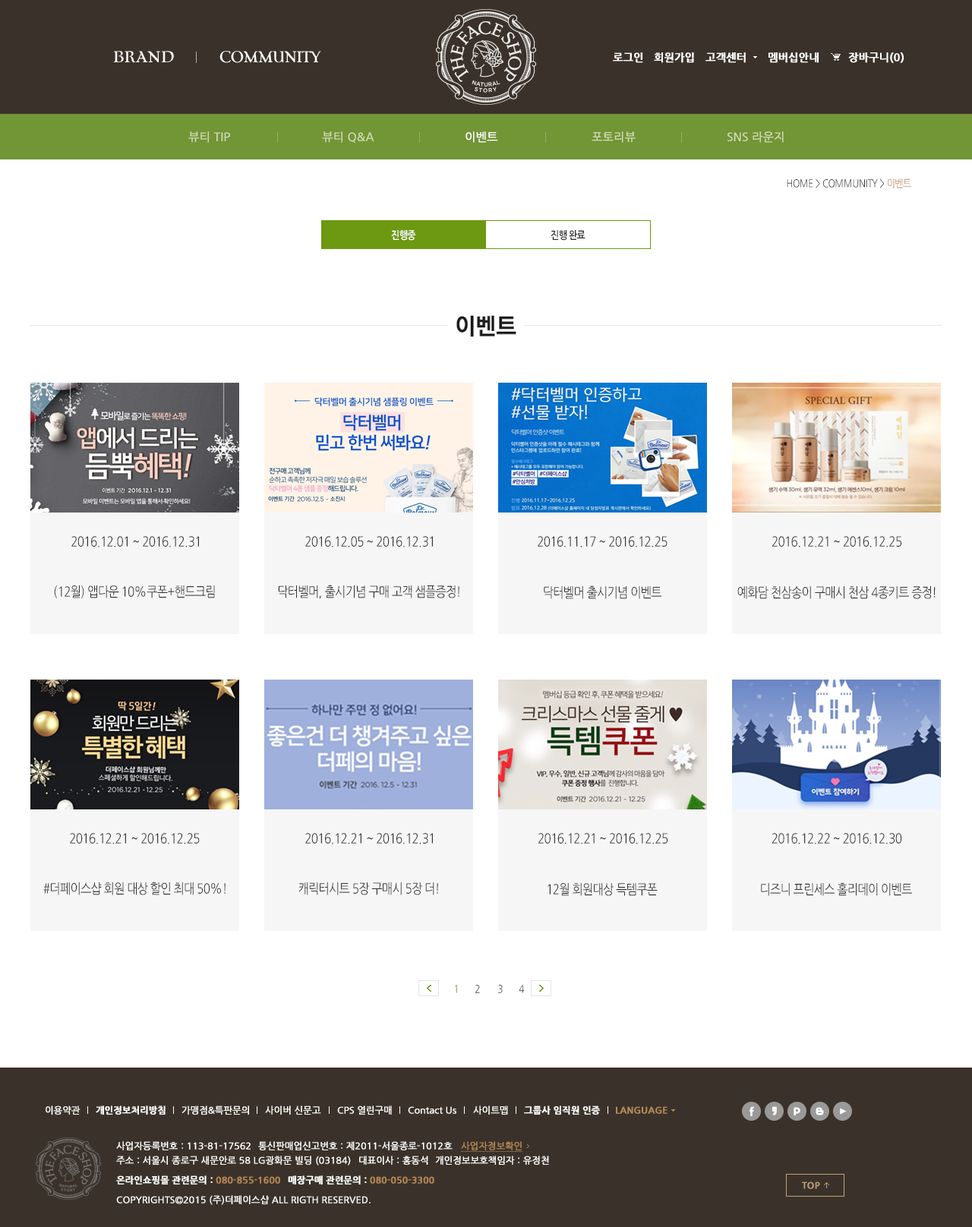
<style>
.page{position:relative;width:972px;height:1227px;background:#ffffff}
.page>*{position:absolute;margin:0}
.t1{font:10.6px "NanumGothicBold";color:#ffffff;font-weight:bold}
.t2{font:11.4px "NanumGothic";color:#cddbb1;font-weight:bold}
.t3{font:11.4px "NanumGothic";color:#ffffff;font-weight:bold}
.t4{font:10.6px "NanumGothic";letter-spacing:-0.03em;color:#333333;scale:0.85 1}
.t5{font:10.6px "NanumGothic";letter-spacing:-0.03em;color:#b68957;scale:0.85 1}
.t6{font:10.6px "NanumGothicBold";letter-spacing:-0.03em;color:#ffffff;scale:0.85 1}
.t7{font:10.6px "NanumGothicBold";letter-spacing:-0.03em;color:#333333;scale:0.85 1}
.t8{font:13.7px "NanumGothic";letter-spacing:-0.03em;color:#333333;scale:0.85 1}
.t9{font:10.6px "NanumGothic";letter-spacing:-0.03em;scale:0.85 1}
.t10{font:9.1px "NanumGothic";color:#ffffff;font-weight:bold}
.t11{font:9.1px "NanumGothicBold";color:#ffffff;font-weight:bold}
.t12{font:9.1px "NanumGothicBold";color:#b68957;font-weight:bold}
.t13{font:9.1px "NanumGothic";color:#b68957;font-weight:bold;text-decoration:underline}
</style>
<div class="page">
<p class="t1" style="left:613px;top:52px;width:30px;height:11px">로그인</p>
<p class="t1" style="left:654px;top:52px;width:40px;height:11px">회원가입</p>
<p class="t1" style="left:705px;top:52px;width:41px;height:11px">고객센터</p>
<p class="t1" style="left:768px;top:52px;width:50px;height:11px">멤버십안내</p>
<p class="t1" style="left:848px;top:52px;width:56px;height:11px">장바구니(0)</p>
<p class="t2" style="left:188px;top:131px;width:42px;height:12px">뷰티 TIP</p>
<p class="t2" style="left:322px;top:131px;width:52px;height:12px">뷰티 Q&amp;A</p>
<p class="t3" style="left:465px;top:131px;width:33px;height:12px">이벤트</p>
<p class="t2" style="left:591px;top:131px;width:45px;height:12px">포토리뷰</p>
<p class="t2" style="left:727px;top:131px;width:57px;height:12px">SNS 라운지</p>
<p class="t4" style="left:787px;top:178px;width:124px;height:10px">HOME &gt; COMMUNITY &gt;<span class="t5"> 이벤트</span></p>
<p class="t6" style="left:391px;top:230px;width:25px;height:11px">진행중</p>
<p class="t7" style="left:550px;top:230px;width:35px;height:11px">진행 완료</p>
<p class="t8" style="left:71px;top:536px;width:128px;height:11px">2016.12.01 ~ 2016.12.31</p>
<p class="t8" style="left:305px;top:536px;width:128px;height:11px">2016.12.05 ~ 2016.12.31</p>
<p class="t8" style="left:538px;top:536px;width:129px;height:11px">2016.11.17 ~ 2016.12.25</p>
<p class="t8" style="left:772px;top:536px;width:130px;height:11px">2016.12.21 ~ 2016.12.25</p>
<p class="t8" style="left:54px;top:585px;width:161px;height:14px">(12월) 앱다운 10%쿠폰+핸드크림</p>
<p class="t8" style="left:278px;top:585px;width:181px;height:14px">닥터벨머, 출시기념 구매 고객 샘플증정!</p>
<p class="t8" style="left:544px;top:585px;width:118px;height:14px">닥터벨머 출시기념 이벤트</p>
<p class="t8" style="left:737px;top:586px;width:198px;height:13px">예화담 천삼송이 구매시 천삼 4종키트 증정!</p>
<p class="t8" style="left:70px;top:833px;width:130px;height:11px">2016.12.21 ~ 2016.12.25</p>
<p class="t8" style="left:305px;top:833px;width:128px;height:11px">2016.12.21 ~ 2016.12.31</p>
<p class="t8" style="left:538px;top:833px;width:130px;height:11px">2016.12.21 ~ 2016.12.25</p>
<p class="t8" style="left:771px;top:833px;width:131px;height:11px">2016.12.22 ~ 2016.12.30</p>
<p class="t8" style="left:43px;top:882px;width:183px;height:13px">#더페이스샵 회원 대상 할인 최대 50%!</p>
<p class="t8" style="left:298px;top:882px;width:140px;height:13px">캐릭터시트 5장 구매시 5장 더!</p>
<p class="t8" style="left:547px;top:883px;width:111px;height:13px">12월 회원대상 득템쿠폰</p>
<p class="t8" style="left:761px;top:883px;width:151px;height:13px">디즈니 프린세스 홀리데이 이벤트</p>
<p class="t9" style="left:455px;top:985px;width:2px;height:8px">1</p>
<p class="t9" style="left:475px;top:985px;width:5px;height:8px">2</p>
<p class="t4" style="left:498px;top:985px;width:5px;height:8px">3</p>
<p class="t9" style="left:519px;top:985px;width:6px;height:8px">4</p>
<p class="t10" style="left:46px;top:1105px;width:34px;height:10px">이용약관</p>
<p class="t11" style="left:96px;top:1105px;width:70px;height:10px">개인정보처리방침</p>
<p class="t10" style="left:181px;top:1105px;width:68px;height:10px">가맹점&amp;특판문의</p>
<p class="t10" style="left:265px;top:1105px;width:56px;height:10px">사이버 신문고</p>
<p class="t10" style="left:337px;top:1105px;width:55px;height:10px">CPS 열린구매</p>
<p class="t10" style="left:408px;top:1106px;width:48px;height:8px">Contact Us</p>
<p class="t10" style="left:473px;top:1105px;width:35px;height:10px">사이트맵</p>
<p class="t11" style="left:524px;top:1105px;width:76px;height:10px">그룹사 임직원 인증</p>
<p class="t12" style="left:616px;top:1106px;width:51px;height:8px">LANGUAGE</p>
<p class="t10" style="left:116px;top:1141px;width:135px;height:9px">사업자등록번호 : 113-81-17562</p>
<p class="t10" style="left:258px;top:1141px;width:195px;height:9px">통신판매업신고번호 : 제2011-서울종로-1012호</p>
<p class="t13" style="left:461px;top:1141px;width:62px;height:11px">사업자정보확인</p>
<p class="t10" style="left:116px;top:1156px;width:235px;height:9px">주소 : 서울시 종로구 새문안로 58 LG광화문 빌딩 (03184)</p>
<p class="t10" style="left:359px;top:1156px;width:69px;height:9px">대표이사 : 홍동석</p>
<p class="t10" style="left:435px;top:1156px;width:114px;height:9px">개인정보보호책임자 : 유정천</p>
<p class="t11" style="left:116px;top:1175px;width:164px;height:9px">온라인쇼핑몰 관련문의 : <span class="t12">080-855-1600</span></p>
<p class="t12" style="left:288px;top:1175px;width:146px;height:9px"><span class="t11">매장구매 관련문의 : </span>080-050-3300</p>
<p class="t10" style="left:116px;top:1195px;width:255px;height:10px">COPYRIGHTS©2015 (주)더페이스샵 ALL RIGTH RESERVED.</p>
</div>
